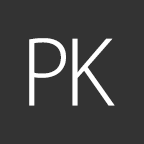
<style>
.page{position:relative;width:144px;height:144px;background:#333333}
.page>*{position:absolute;margin:0}
.t1{font:99px "MyriadSetPro-Thin";letter-spacing:-0.055em;color:#ffffff}
</style>
<div class="page">
<p class="t1" style="left:29px;top:38px;width:86px;height:68px">PK</p>
</div>
